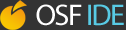
<style>
.page{position:relative;width:126px;height:30px;background:#333333}
.page>*{position:absolute;margin:0}
.t1{font:30px "MyriadPro-Regular";letter-spacing:-0.05em;color:#ffffff}
.t2{font:30px "MyriadPro-Regular";letter-spacing:-0.05em;color:#58cae4}
</style>
<div class="page">
<p class="t1" style="left:36px;top:4px;width:88px;height:22px">OSF <span class="t2">IDE</span></p>
</div>
